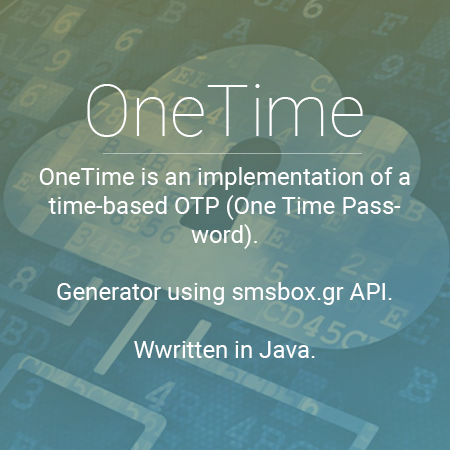
<style>
.page{position:relative;width:450px;height:450px}
.page>*{position:absolute;margin:0}
.t1{font:72px "Roboto-Thin";color:#ffffff}
.t2{font:24px "Roboto-Regular";color:#ffffff}
</style>
<div class="page">
<p class="t1" style="left:87px;top:84px;width:276px;height:53px">OneTime</p>
<p class="t2" style="left:39px;top:167px;width:371px;height:191px;text-align:center">OneTime is an implementation of a time-based OTP (One Time Password). <br><br>Generator using smsbox.gr API.<br><br>Wwritten in Java.</p>
</div>
